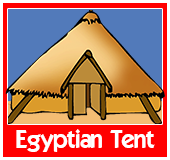
<style>
.page{position:relative;width:170px;height:160px;background:#ff0000}
.page>*{position:absolute;margin:0}
.t1{font:24px "ELEGANCE";color:#ffffff}
</style>
<div class="page">
<p class="t1" style="left:16px;top:129px;width:139px;height:23px">Egyptian Tent</p>
</div>
